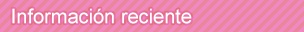
<style>
.page{position:relative;width:304px;height:32px}
.page>*{position:absolute;margin:0}
.t1{font:20px "ArialMT";color:#ffffff}
</style>
<div class="page">
<p class="t1" style="left:12px;top:8px;width:180px;height:16px">Información reciente</p>
</div>
